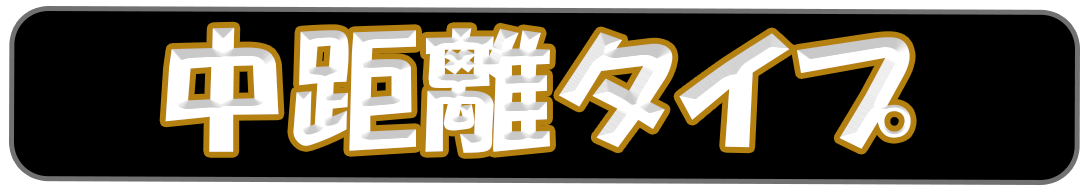
<style>
.page{position:relative;width:1089px;height:192px;background:#000000}
.page>*{position:absolute;margin:0}
.t1{font:130.2px "HGPSoeiKakupoptai";letter-spacing:0.025em;color:#ffffff}
</style>
<div class="page">
<p class="t1" style="left:165px;top:27px;width:746px;height:126px">中距離タイプ</p>
</div>
